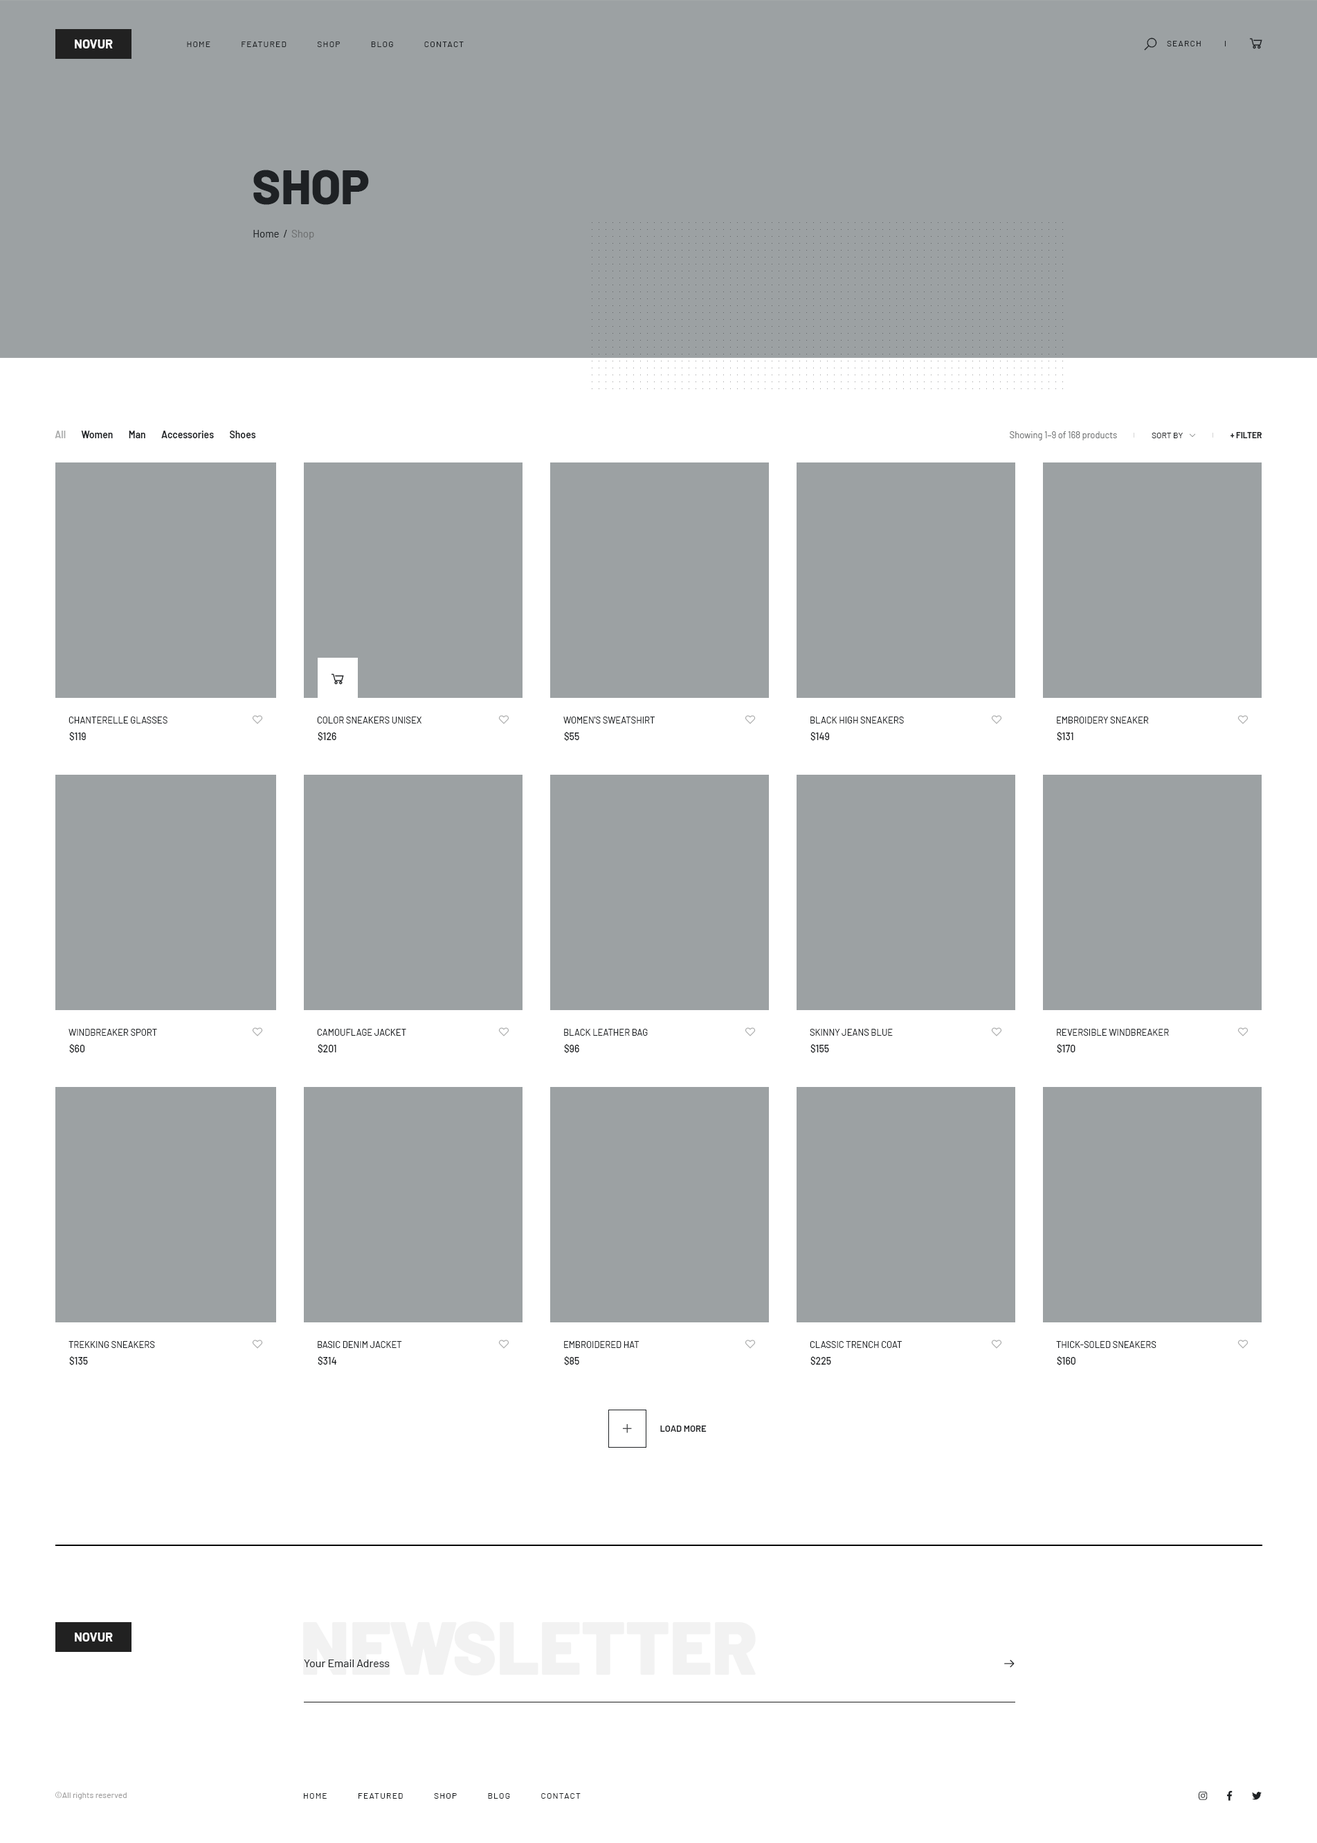
<style>
.page{position:relative;width:1317px;height:1843px;background:#ffffff}
.page>*{position:absolute;margin:0}
.t1{font:12.5px "Barlow-Bold";color:#fefefe;text-transform:uppercase}
.t2{font:8.3px "Barlow-Regular";letter-spacing:0.1em;color:#1e2124;text-transform:uppercase}
.t3{font:48.5px "Barlow-ExtraBold";color:#1e2124;text-transform:uppercase}
.t4{font:10.4px "Barlow-Regular";color:#1e2124}
.t5{font:10.4px "Barlow-Regular";color:#6e7071}
.t6{font:9.7px "Barlow-SemiBold";color:#1e2124}
.t7{font:9.7px "Barlow-SemiBold";color:#aaabab}
.t8{font:9px "Barlow-Regular";color:#6e7071}
.t9{font:8.3px "Barlow-Regular";color:#1e2124;text-transform:uppercase}
.t10{font:8.3px "Barlow-Bold";color:#1e2124;text-transform:uppercase}
.t11{font:9px "Barlow-Regular";color:#1e2124;text-transform:uppercase}
.t12{font:9.7px "Barlow-Medium";color:#1e2124}
.t13{font:9px "Barlow-SemiBold";color:#1e2124;text-transform:uppercase}
.t14{font:74.1px "Barlow-Black";color:#f2f2f2}
.t15{font:11.1px "Barlow-Regular";color:#1e2124}
.t16{font:8.3px "Barlow-Regular";color:#9e9d9d}
</style>
<div class="page">
<p class="t1" style="left:75px;top:39px;width:38px;height:9px">novur</p>
<p class="t2" style="left:187px;top:42px;width:277px;height:5px">Home            Featured            Shop            Blog            Contact</p>
<p class="t2" style="left:1167px;top:41px;width:34px;height:5px">Search</p>
<p class="t3" style="left:253px;top:170px;width:116px;height:35px">Shop</p>
<p class="t4" style="left:253px;top:230px;width:61px;height:10px">Home  /<span class="t5">  Shop</span></p>
<p class="t6" style="left:55px;top:431px;width:201px;height:7px"><span class="t7">All</span>        Women        Man        Accessories        Shoes</p>
<p class="t8" style="left:1010px;top:431px;width:107px;height:9px">Showing 1–9 of 168 products</p>
<p class="t9" style="left:1152px;top:433px;width:31px;height:5px">Sort by</p>
<p class="t10" style="left:1231px;top:432px;width:31px;height:6px">+ Filter</p>
<p class="t11" style="left:69px;top:717px;width:99px;height:6px">Chanterelle Glasses</p>
<p class="t11" style="left:317px;top:717px;width:105px;height:6px">Color Sneakers Unisex</p>
<p class="t11" style="left:564px;top:717px;width:91px;height:6px">Women's Sweatshirt</p>
<p class="t11" style="left:811px;top:717px;width:93px;height:6px">Black High Sneakers</p>
<p class="t11" style="left:1057px;top:717px;width:92px;height:6px">Embroidery Sneaker</p>
<p class="t12" style="left:69px;top:732px;width:17px;height:9px">$119</p>
<p class="t12" style="left:318px;top:732px;width:18px;height:9px">$126</p>
<p class="t12" style="left:564px;top:732px;width:15px;height:9px">$55</p>
<p class="t12" style="left:811px;top:732px;width:19px;height:9px">$149</p>
<p class="t12" style="left:1057px;top:732px;width:17px;height:9px">$131</p>
<p class="t11" style="left:69px;top:1029px;width:88px;height:7px">Windbreaker Sport</p>
<p class="t11" style="left:317px;top:1029px;width:89px;height:7px">Camouflage Jacket</p>
<p class="t11" style="left:564px;top:1029px;width:84px;height:7px">Black Leather Bag</p>
<p class="t11" style="left:810px;top:1029px;width:83px;height:7px">Skinny Jeans Blue</p>
<p class="t11" style="left:1057px;top:1029px;width:112px;height:7px">Reversible Windbreaker</p>
<p class="t12" style="left:69px;top:1044px;width:16px;height:9px">$60</p>
<p class="t12" style="left:318px;top:1044px;width:18px;height:9px">$201</p>
<p class="t12" style="left:564px;top:1044px;width:15px;height:9px">$96</p>
<p class="t12" style="left:811px;top:1044px;width:18px;height:9px">$155</p>
<p class="t12" style="left:1057px;top:1044px;width:19px;height:9px">$170</p>
<p class="t11" style="left:69px;top:1341px;width:86px;height:7px">Trekking Sneakers</p>
<p class="t11" style="left:318px;top:1341px;width:84px;height:7px">Basic Denim Jacket</p>
<p class="t11" style="left:564px;top:1341px;width:76px;height:7px">Embroidered Hat</p>
<p class="t11" style="left:810px;top:1341px;width:92px;height:7px">Classic Trench Coat</p>
<p class="t11" style="left:1056px;top:1341px;width:101px;height:7px">Thick-Soled Sneakers</p>
<p class="t12" style="left:69px;top:1356px;width:19px;height:9px">$135</p>
<p class="t12" style="left:318px;top:1356px;width:19px;height:9px">$314</p>
<p class="t12" style="left:564px;top:1356px;width:15px;height:9px">$85</p>
<p class="t12" style="left:811px;top:1356px;width:20px;height:9px">$225</p>
<p class="t12" style="left:1057px;top:1356px;width:19px;height:9px">$160</p>
<p class="t13" style="left:660px;top:1425px;width:47px;height:7px">Load More</p>
<p class="t14" style="left:303px;top:1621px;width:453px;height:54px">NEWSLETTER</p>
<p class="t1" style="left:75px;top:1632px;width:38px;height:9px">Novur</p>
<p class="t15" style="left:304px;top:1659px;width:86px;height:8px">Your Email Adress</p>
<p class="t16" style="left:55px;top:1792px;width:72px;height:7px">©All rights reserved</p>
<p class="t2" style="left:304px;top:1793px;width:277px;height:6px">Home            Featured            Shop            Blog            Contact</p>
</div>
